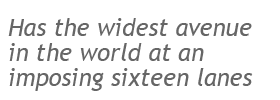
<style>
.page{position:relative;width:280px;height:100px;background:#ffffff}
.page>*{position:absolute;margin:0}
.t1{font:24px/25px "TrebuchetMS-Italic";color:#666666}
</style>
<div class="page">
<p class="t1" style="left:8px;top:18px;width:245px;height:73px">Has the widest avenue <br>in the world at an <br>imposing sixteen lanes</p>
</div>
